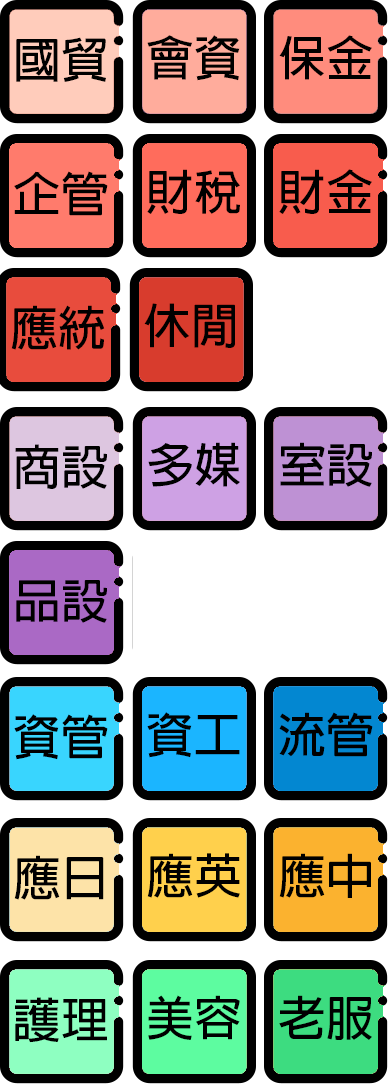
<style>
.page{position:relative;width:388px;height:1084px;background:#ffffff}
.page>*{position:absolute;margin:0}
.t1{font:47.8px "AdobeFanHeitiStd-Bold";color:#000000}
</style>
<div class="page">
<p class="t1" style="left:16px;top:37px;width:90px;height:45px">國貿</p>
<p class="t1" style="left:147px;top:35px;width:93px;height:46px">會資</p>
<p class="t1" style="left:279px;top:35px;width:93px;height:45px">保金</p>
<p class="t1" style="left:14px;top:171px;width:94px;height:45px">企管</p>
<p class="t1" style="left:147px;top:169px;width:93px;height:45px">財稅</p>
<p class="t1" style="left:279px;top:169px;width:93px;height:45px">財金</p>
<p class="t1" style="left:11px;top:305px;width:94px;height:45px">應統</p>
<p class="t1" style="left:144px;top:303px;width:91px;height:45px">休閒</p>
<p class="t1" style="left:15px;top:444px;width:92px;height:45px">商設</p>
<p class="t1" style="left:148px;top:442px;width:92px;height:45px">多媒</p>
<p class="t1" style="left:280px;top:442px;width:92px;height:45px">室設</p>
<p class="t1" style="left:16px;top:580px;width:91px;height:43px">品設</p>
<p class="t1" style="left:147px;top:712px;width:93px;height:46px">資工</p>
<p class="t1" style="left:279px;top:712px;width:94px;height:45px">流管</p>
<p class="t1" style="left:14px;top:714px;width:94px;height:46px">資管</p>
<p class="t1" style="left:14px;top:855px;width:90px;height:45px">應日</p>
<p class="t1" style="left:147px;top:853px;width:93px;height:45px">應英</p>
<p class="t1" style="left:279px;top:853px;width:92px;height:45px">應中</p>
<p class="t1" style="left:15px;top:997px;width:92px;height:46px">護理</p>
<p class="t1" style="left:148px;top:995px;width:92px;height:45px">美容</p>
<p class="t1" style="left:279px;top:995px;width:93px;height:45px">老服</p>
</div>
